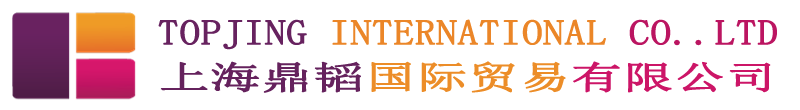
<style>
.page{position:relative;width:800px;height:110px;background:#ffffff}
.page>*{position:absolute;margin:0}
.t1{font:35.2px "SimSun";color:#eb8628;font-weight:bold;scale:1.15 1}
.t2{font:35.2px "SimSun";color:#67225f;font-weight:bold;scale:1.15 1}
.t3{font:35.2px "SimSun";color:#bb1561;font-weight:bold;scale:1.15 1}
.t4{font:32.5px "SimSun";color:#65225d;font-weight:bold;scale:1.55 1}
.t5{font:32.5px "SimSun";color:#ec8d28;font-weight:bold;scale:1.55 1}
.t6{font:32.5px "SimSun";color:#cc1567;font-weight:bold;scale:1.55 1}
</style>
<div class="page">
<p class="t1" style="left:158px;top:19px;width:619px;height:31px"><span class="t2">TOPJING </span>INTERNATIONAL <span class="t3">CO..LTD</span></p>
<p class="t4" style="left:160px;top:61px;width:611px;height:32px">上海鼎韬<span class="t5">国际贸易</span><span class="t6">有限公司</span></p>
</div>
